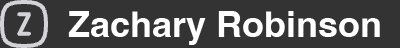
<style>
.page{position:relative;width:400px;height:48px;background:#333333}
.page>*{position:absolute;margin:0}
.t1{font:36px "Helvetica-Bold";color:#ffffff}
</style>
<div class="page">
<p class="t1" style="left:68px;top:11px;width:312px;height:34px">Zachary Robinson</p>
</div>
